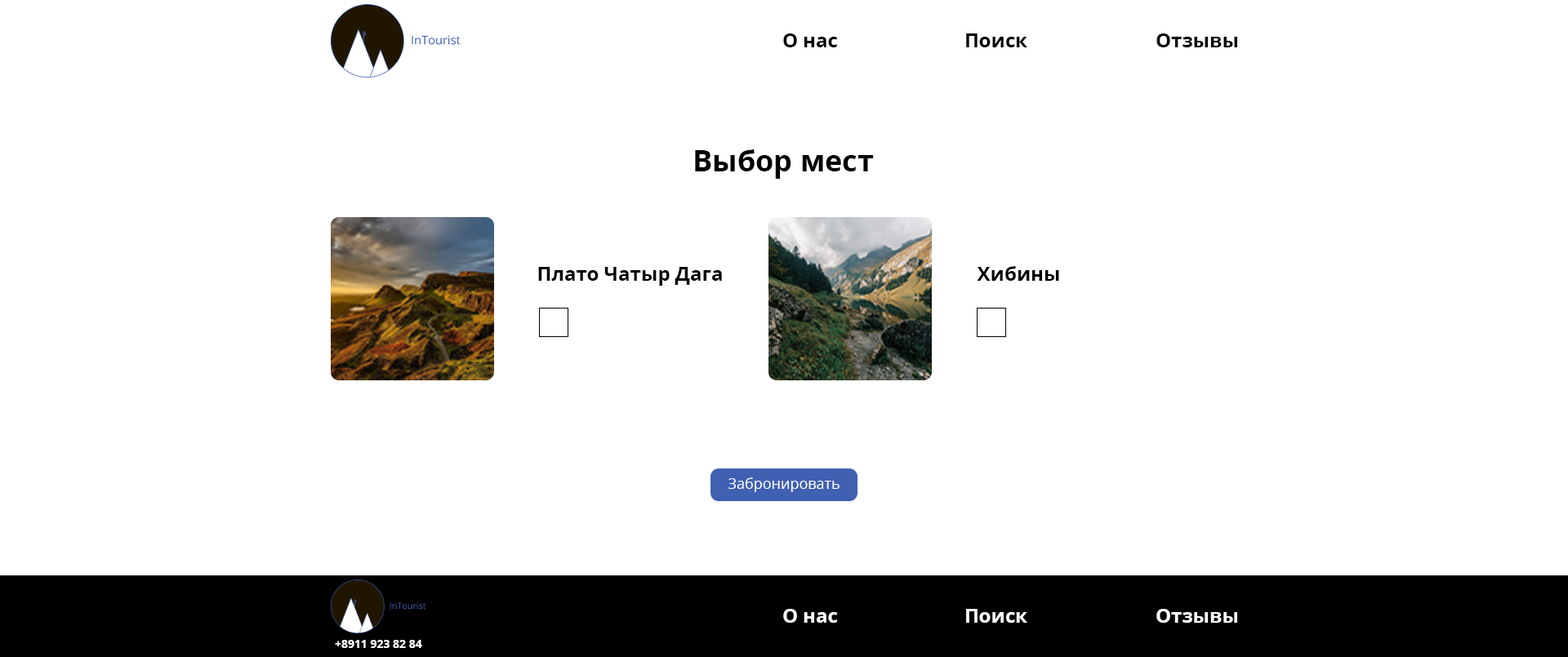
<style>
.page{position:relative;width:1568px;height:657px;background:#ffffff}
.page>*{position:absolute;margin:0}
.t1{font:19.6px "OpenSans-Bold";color:#000000}
.t2{font:29.4px "OpenSans-Bold";color:#000000}
.t3{font:14.7px "OpenSans-Regular";color:#ffffff}
.t4{font:19.6px "OpenSans-Bold";color:#ffffff}
.t5{font:11.4px "OpenSans-Bold";color:#ffffff}
</style>
<div class="page">
<p class="t1" style="left:783px;top:33px;width:54px;height:14px">О нас</p>
<p class="t1" style="left:966px;top:33px;width:61px;height:14px">Поиск</p>
<p class="t1" style="left:1156px;top:33px;width:81px;height:14px">Отзывы</p>
<p class="t2" style="left:695px;top:149px;width:179px;height:30px">Выбор мест</p>
<p class="t1" style="left:538px;top:267px;width:184px;height:19px">Плато Чатыр Дага</p>
<p class="t1" style="left:977px;top:266px;width:82px;height:15px">Хибины</p>
<p class="t3" style="left:728px;top:478px;width:112px;height:14px">Забронировать</p>
<p class="t4" style="left:783px;top:609px;width:54px;height:14px">О нас</p>
<p class="t4" style="left:966px;top:609px;width:61px;height:14px">Поиск</p>
<p class="t4" style="left:1156px;top:609px;width:81px;height:14px">Отзывы</p>
<p class="t5" style="left:335px;top:640px;width:87px;height:8px">+8911 923 82 84</p>
</div>
